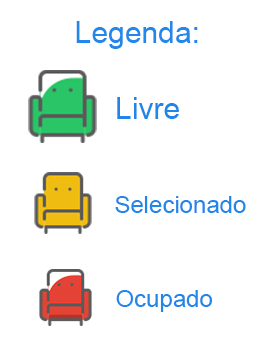
<style>
.page{position:relative;width:274px;height:348px;background:#ffffff}
.page>*{position:absolute;margin:0}
.t1{font:30px "ArialMT";color:#2286ea}
.t2{font:30px "ArialMT";color:#2185e8}
.t3{font:24px "ArialMT";color:#2285e8}
</style>
<div class="page">
<p class="t1" style="left:76px;top:21px;width:122px;height:28px">Legenda:</p>
<p class="t2" style="left:117px;top:97px;width:62px;height:22px">Livre</p>
<p class="t3" style="left:115px;top:196px;width:131px;height:17px">Selecionado</p>
<p class="t3" style="left:116px;top:290px;width:97px;height:22px">Ocupado</p>
</div>
